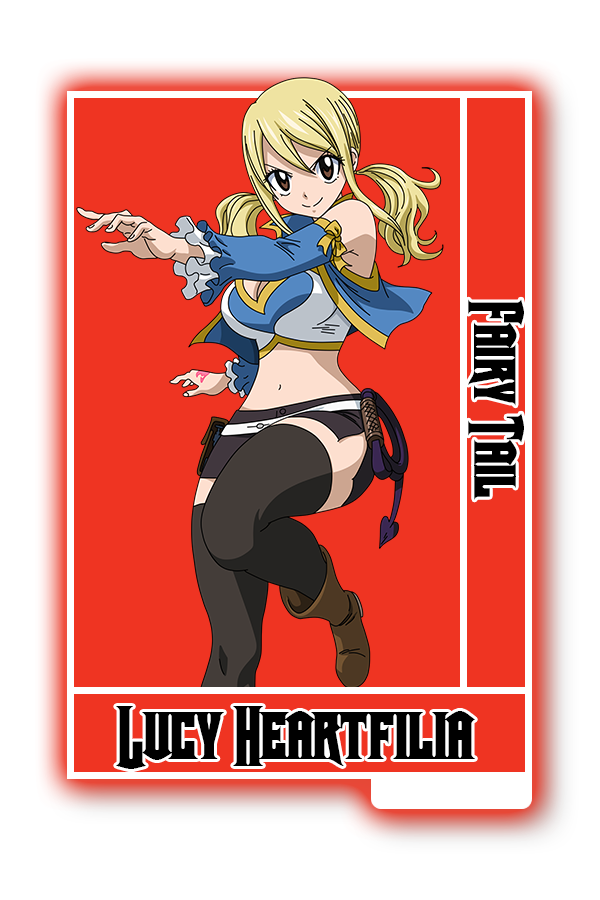
<style>
.page{position:relative;width:600px;height:900px;background:#ef3422}
.page>*{position:absolute;margin:0}
.t1{font:61.5px "Crown-Title";color:#000000}
.t2{font:70.1px "Crown-Title";color:#000000}
</style>
<div class="page">
<p class="t1" style="left:468px;top:299px;width:56px;height:201px;rotate:90deg">Fairy Tail</p>
<p class="t2" style="left:116px;top:706px;width:359px;height:63px">Lucy Heartfilia</p>
</div>
